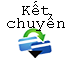
<style>
.page{position:relative;width:71px;height:58px;background:#ffffff}
.page>*{position:absolute;margin:0}
.t1{font:12px/13.3px "CourierNewPSMT";color:#000000}
</style>
<div class="page">
<p class="t1" style="left:7px;top:1px;width:58px;height:30px;text-align:center">Kết<br>chuyển</p>
</div>
